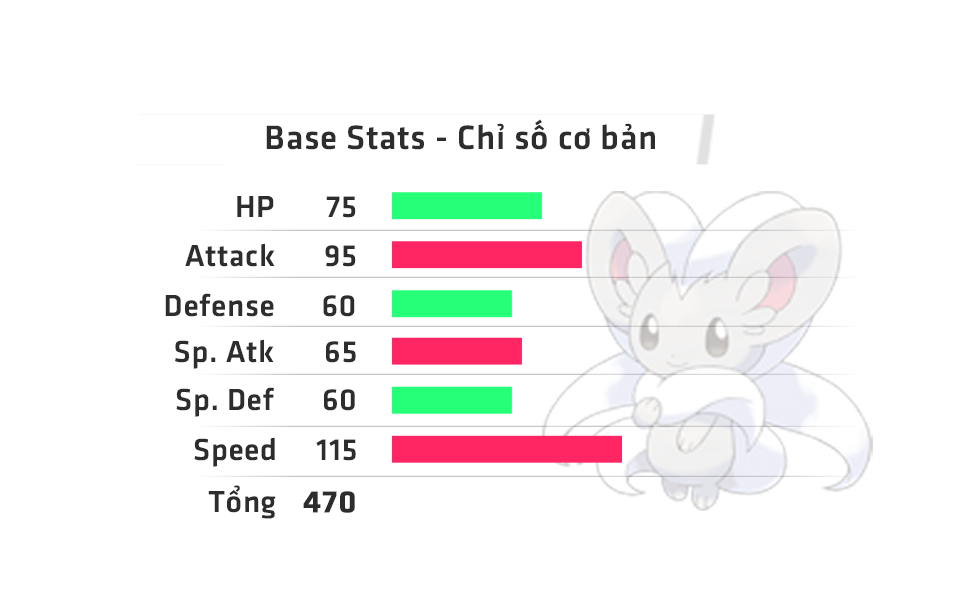
<style>
.page{position:relative;width:971px;height:593px;background:#ffffff}
.page>*{position:absolute;margin:0}
.t1{font:35px "UTM-Facebook-K&T";letter-spacing:0.02em;color:#2d2d2d}
.t2{font:31.6px "UTM-Facebook-K&T";letter-spacing:0.02em;color:#2d2d2d}
.t3{font:31.6px "UTM-Facebook-K&T";letter-spacing:0.02em;color:#2d2d2d;font-weight:bold}
</style>
<div class="page">
<p class="t1" style="left:266px;top:119px;width:389px;height:31px">Base Stats - Chỉ số cơ bản</p>
<p class="t2" style="left:237px;top:196px;width:37px;height:21px">HP</p>
<p class="t2" style="left:326px;top:196px;width:30px;height:22px">75</p>
<p class="t2" style="left:185px;top:243px;width:90px;height:24px">Attack</p>
<p class="t2" style="left:325px;top:245px;width:31px;height:22px">95</p>
<p class="t2" style="left:165px;top:293px;width:109px;height:24px">Defense</p>
<p class="t2" style="left:323px;top:295px;width:32px;height:22px">60</p>
<p class="t2" style="left:175px;top:339px;width:99px;height:30px">Sp. Atk</p>
<p class="t2" style="left:326px;top:341px;width:30px;height:22px">65</p>
<p class="t2" style="left:176px;top:387px;width:98px;height:30px">Sp. Def</p>
<p class="t2" style="left:324px;top:389px;width:31px;height:22px">60</p>
<p class="t2" style="left:194px;top:437px;width:81px;height:30px">Speed</p>
<p class="t2" style="left:316px;top:439px;width:40px;height:22px">115</p>
<p class="t2" style="left:208px;top:485px;width:68px;height:34px">Tổng</p>
<p class="t3" style="left:303px;top:491px;width:52px;height:22px">470</p>
</div>
